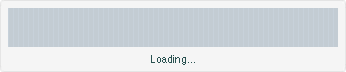
<style>
.page{position:relative;width:346px;height:72px;background:#f5f5f5}
.page>*{position:absolute;margin:0}
.t1{font:10px "Helvetica";color:#2a5251}
</style>
<div class="page">
<p class="t1" style="left:151px;top:55px;width:44px;height:10px">Loading...</p>
</div>
